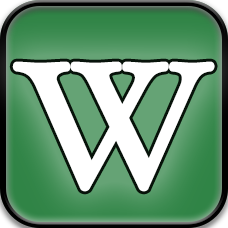
<style>
.page{position:relative;width:228px;height:228px}
.page>*{position:absolute;margin:0}
.t1{font:175px "HoeflerText-Regular";color:#ffffff;font-weight:bold}
</style>
<div class="page">
<p class="t1" style="left:12px;top:61px;width:203px;height:131px">W</p>
</div>
